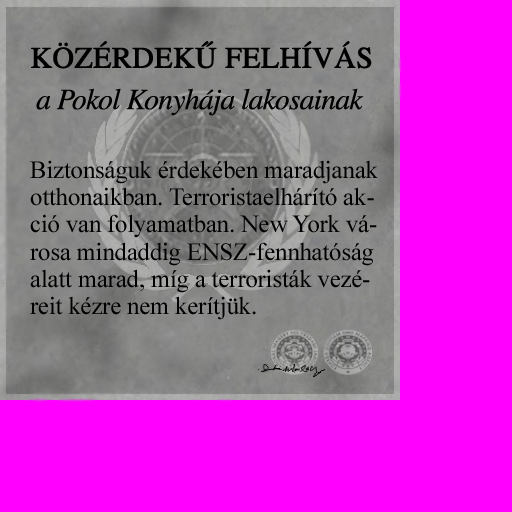
<style>
.page{position:relative;width:512px;height:512px;background:#ff00ff}
.page>*{position:absolute;margin:0}
.t1{font:29.6px/13.8px "TimesCEItalic";letter-spacing:-0.025em;color:#000000}
.t2{font:29.6px/13.8px "TimesCERoman";letter-spacing:-0.006em;color:#000000;font-weight:bold}
.t3{font:24.7px/27.2px "TimesNewRomanPSMT";letter-spacing:-0.006em;color:#000000}
</style>
<div class="page">
<p class="t1" style="left:31px;top:41px;width:341px;height:75px;text-align:center"><span class="t2">  KÖZÉRDEKŰ FELHÍVÁS<br><br><br></span> a Pokol Konyhája lakosainak</p>
<p class="t3" style="left:30px;top:160px;width:348px;height:160px">Biztonságuk érdekében maradjanak<br>otthonaikban. Terroristaelhárító ak-<br>ció van folyamatban. New York vá-<br>rosa mindaddig ENSZ-fennhatóság<br>alatt marad, míg a terroristák vezé-<br>reit kézre nem kerítjük.</p>
</div>
